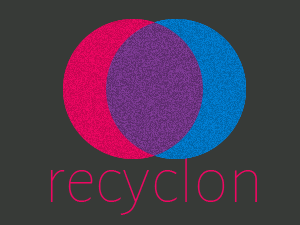
<style>
.page{position:relative;width:300px;height:225px;background:#373a37}
.page>*{position:absolute;margin:0}
.t1{font:70px "AlegreyaSans-Thin";color:#ee0762}
</style>
<div class="page">
<p class="t1" style="left:50px;top:153px;width:207px;height:62px">recyclon</p>
</div>
